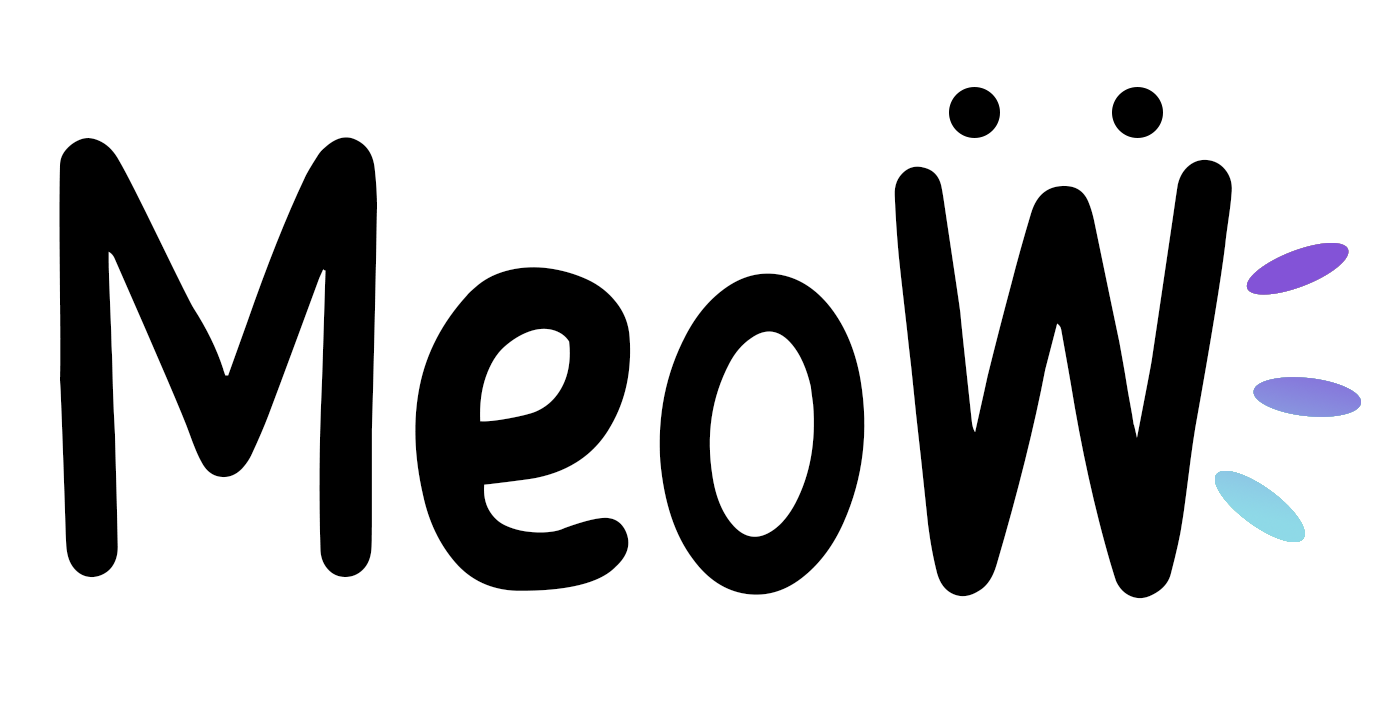
<style>
.page{position:relative;width:1399px;height:712px;background:#ffffff}
.page>*{position:absolute;margin:0}
.t1{font:628.5px "PapernotesRegular";color:#000000;scale:0.9 1}
</style>
<div class="page">
<p class="t1" style="left:59px;top:137px;width:806px;height:458px">Meo</p>
<p class="t1" style="left:894px;top:159px;width:338px;height:440px">W</p>
</div>
